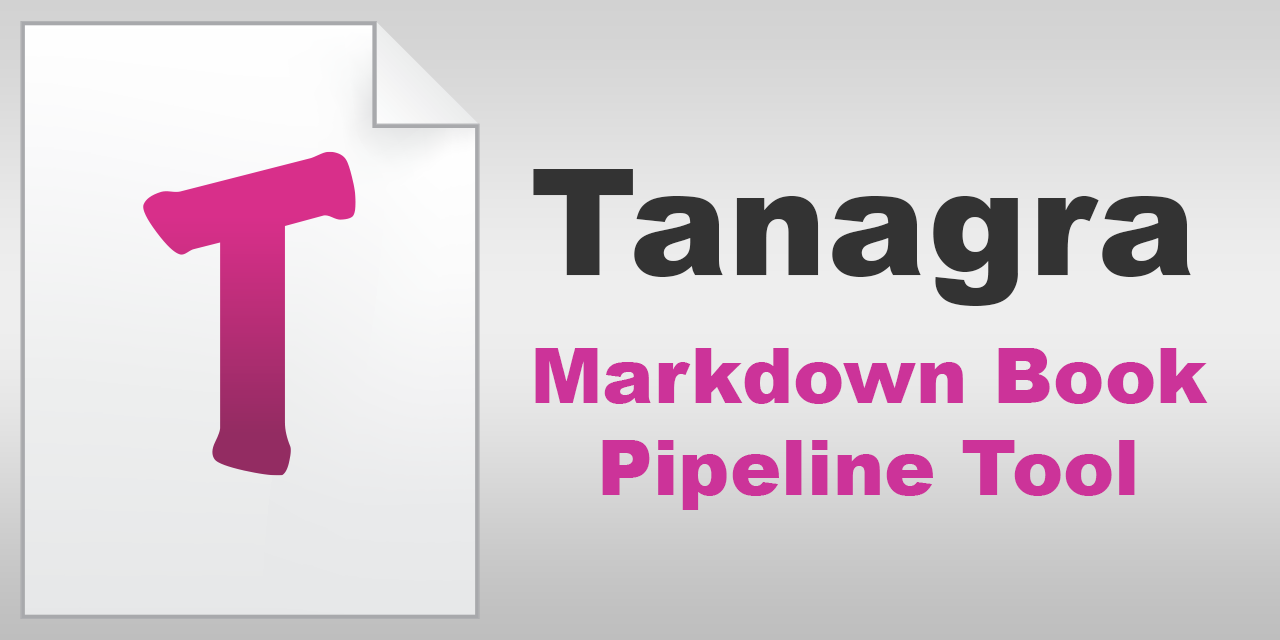
<style>
.page{position:relative;width:1280px;height:640px}
.page>*{position:absolute;margin:0}
.t1{font:148.1px "Arial-Black";color:#333333}
.t2{font:77.1px "Arial-Black";color:#cc3399}
</style>
<div class="page">
<p class="t1" style="left:533px;top:169px;width:658px;height:137px">Tanagra</p>
<p class="t2" style="left:535px;top:348px;width:673px;height:162px;text-align:center">Markdown Book<br>Pipeline Tool</p>
</div>
